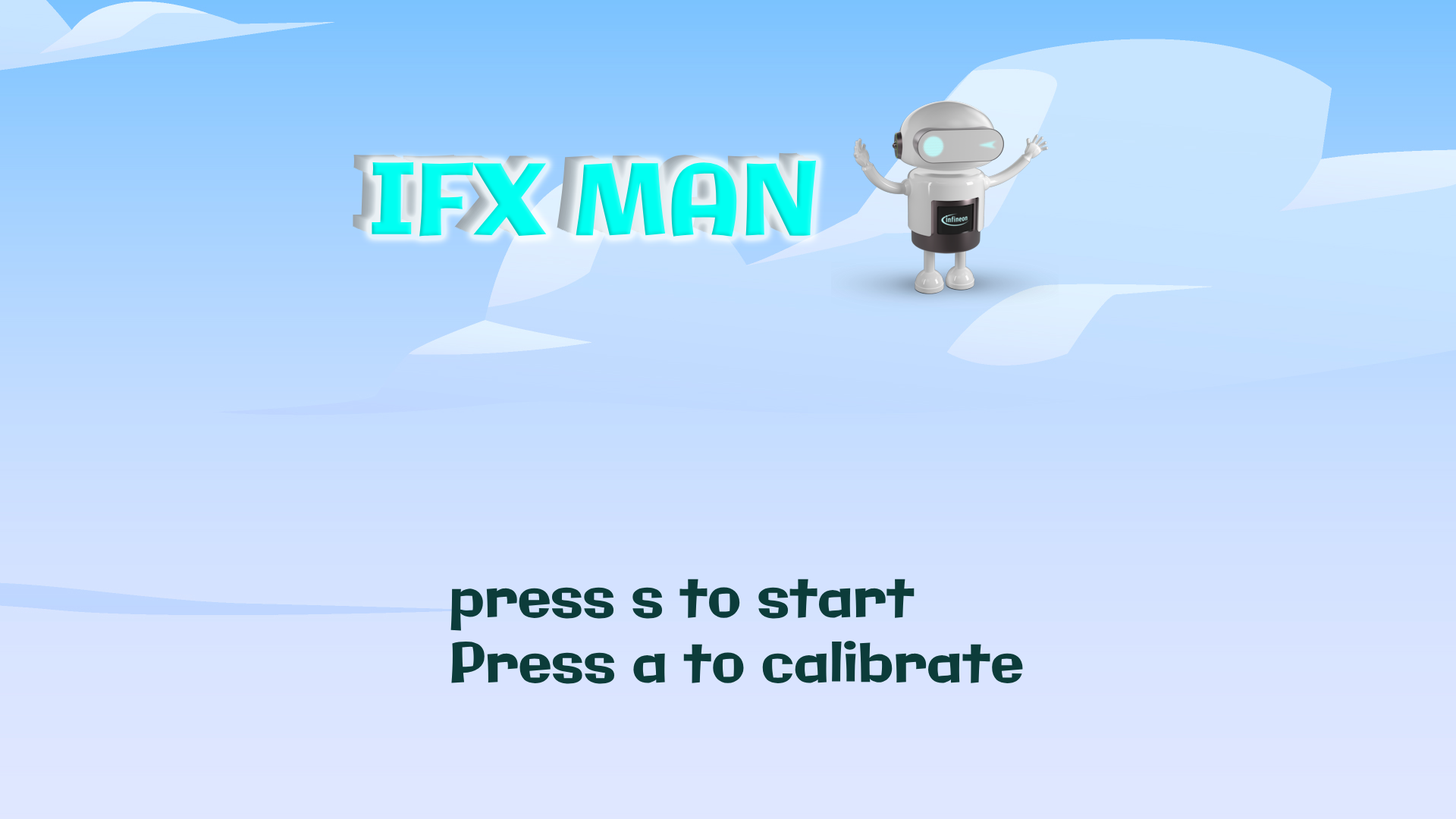
<style>
.page{position:relative;width:1456px;height:819px}
.page>*{position:absolute;margin:0}
.t1{font:97.1px "Galindo-Regular";color:#00fff2}
.t2{font:54.6px "Galindo-Regular";color:#0c3c3a}
</style>
<div class="page">
<p class="t1" style="left:372px;top:160px;width:445px;height:77px">IFX MAN</p>
<p class="t2" style="left:450px;top:579px;width:573px;height:105px">press s to start<br>Press a to calibrate</p>
</div>
